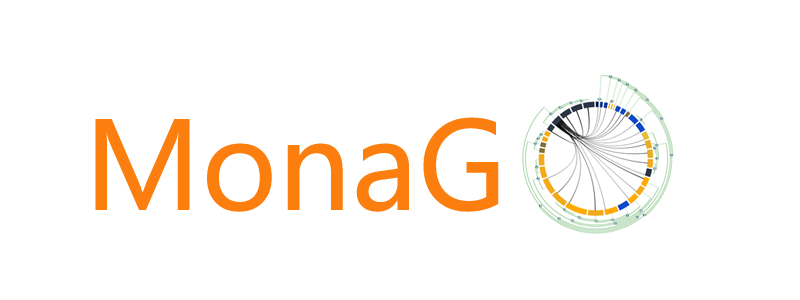
<style>
.page{position:relative;width:800px;height:300px;background:#ffffff}
.page>*{position:absolute;margin:0}
.t1{font:120px "MicrosoftYaHei";color:#fb7e0f}
</style>
<div class="page">
<p class="t1" style="left:95px;top:117px;width:404px;height:95px">MonaG</p>
</div>
